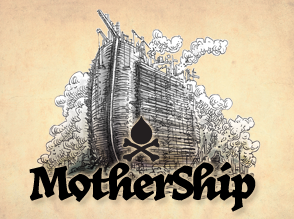
<style>
.page{position:relative;width:294px;height:219px}
.page>*{position:absolute;margin:0}
.t1{font:46.1px "Herb";color:#000000}
</style>
<div class="page">
<p class="t1" style="left:29px;top:161px;width:227px;height:51px">MotherShip</p>
</div>
